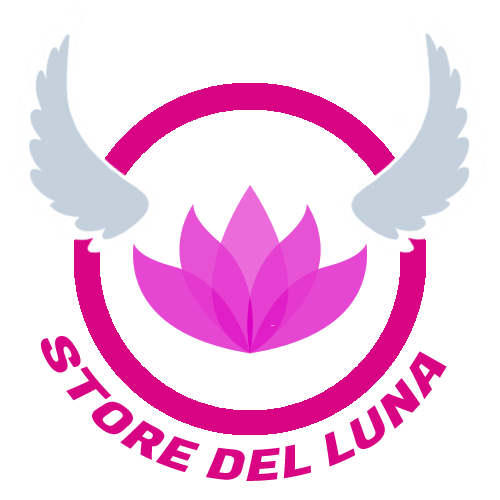
<style>
.page{position:relative;width:500px;height:500px;background:#ffffff}
.page>*{position:absolute;margin:0}
.t1{font:43px "FugazOne-Regular";color:#d80484}
</style>
<div class="page">
<p class="t1" style="left:40px;top:335px;width:407px;height:146px">STORE DEL LUNA</p>
</div>
